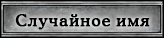
<style>
.page{position:relative;width:164px;height:38px}
.page>*{position:absolute;margin:0}
.t1{font:16.4px "CooperMediumCBT";letter-spacing:0.03em;color:#000000;font-weight:bold}
</style>
<div class="page">
<p class="t1" style="left:15px;top:14px;width:135px;height:16px">Случайное имя</p>
</div>
